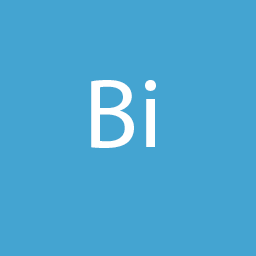
<style>
.page{position:relative;width:256px;height:256px;background:#44a4d1}
.page>*{position:absolute;margin:0}
.t1{font:100px "MyriadPro-Regular";color:#ffffff}
</style>
<div class="page">
<p class="t1" style="left:91px;top:80px;width:65px;height:68px">Bi</p>
</div>
